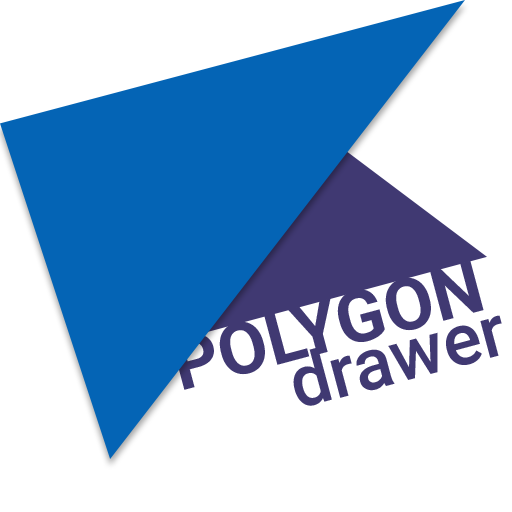
<style>
.page{position:relative;width:512px;height:512px;background:#ffffff}
.page>*{position:absolute;margin:0}
.t1{font:72px/48px "Roboto-Bold";color:#403972}
.t2{font:72px/48px "Roboto-Medium";color:#403972}
</style>
<div class="page">
<p class="t1" style="left:171px;top:260px;width:331px;height:146px;rotate:-15deg">POLYGON<br><span class="t2">   drawer</span></p>
</div>
